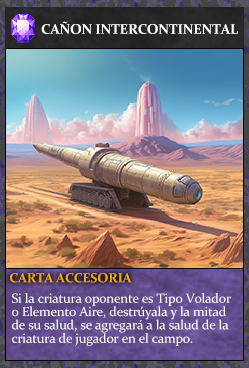
<style>
.page{position:relative;width:249px;height:368px}
.page>*{position:absolute;margin:0}
.t1{font:14px "Constantia-Bold";letter-spacing:-0.02em;color:#ffffff}
.t2{font:13.3px "Constantia-Bold";letter-spacing:-0.02em;color:#f2ac05}
.t3{font:13.3px/13.3px "Constantia";letter-spacing:-0.02em;color:#ffffff}
</style>
<div class="page">
<p class="t1" style="left:41px;top:21px;width:197px;height:13px">CAÑON INTERCONTINENTAL</p>
<p class="t2" style="left:10px;top:273px;width:122px;height:10px">CARTA ACCESORIA</p>
<p class="t3" style="left:12px;top:293px;width:219px;height:53px">Si la criatura oponente es Tipo Volador<br>o Elemento Aire, destrúyala y la mitad<br>de su salud, se agregará a la salud de la<br>criatura de jugador en el campo.</p>
</div>
